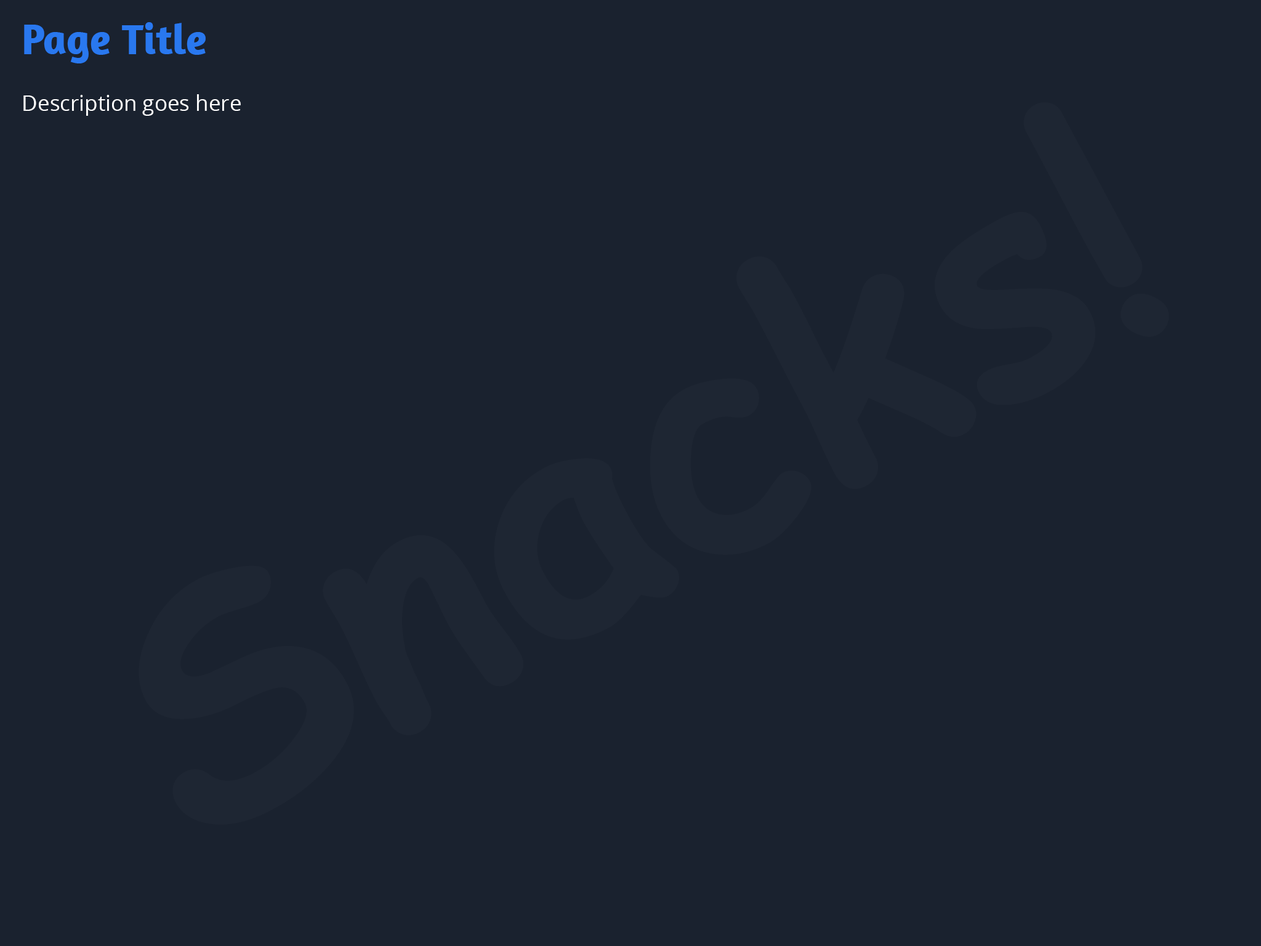
<style>
.page{position:relative;width:1261px;height:946px;background:#1a222f}
.page>*{position:absolute;margin:0}
.t1{font:43.1px "Amaranth-Bold";color:#2978ef}
.t2{font:21.5px "OpenSans";color:#ffffff}
</style>
<div class="page">
<p class="t1" style="left:24px;top:22px;width:182px;height:41px">Page Title</p>
<p class="t2" style="left:23px;top:94px;width:218px;height:22px">Description goes here</p>
</div>
